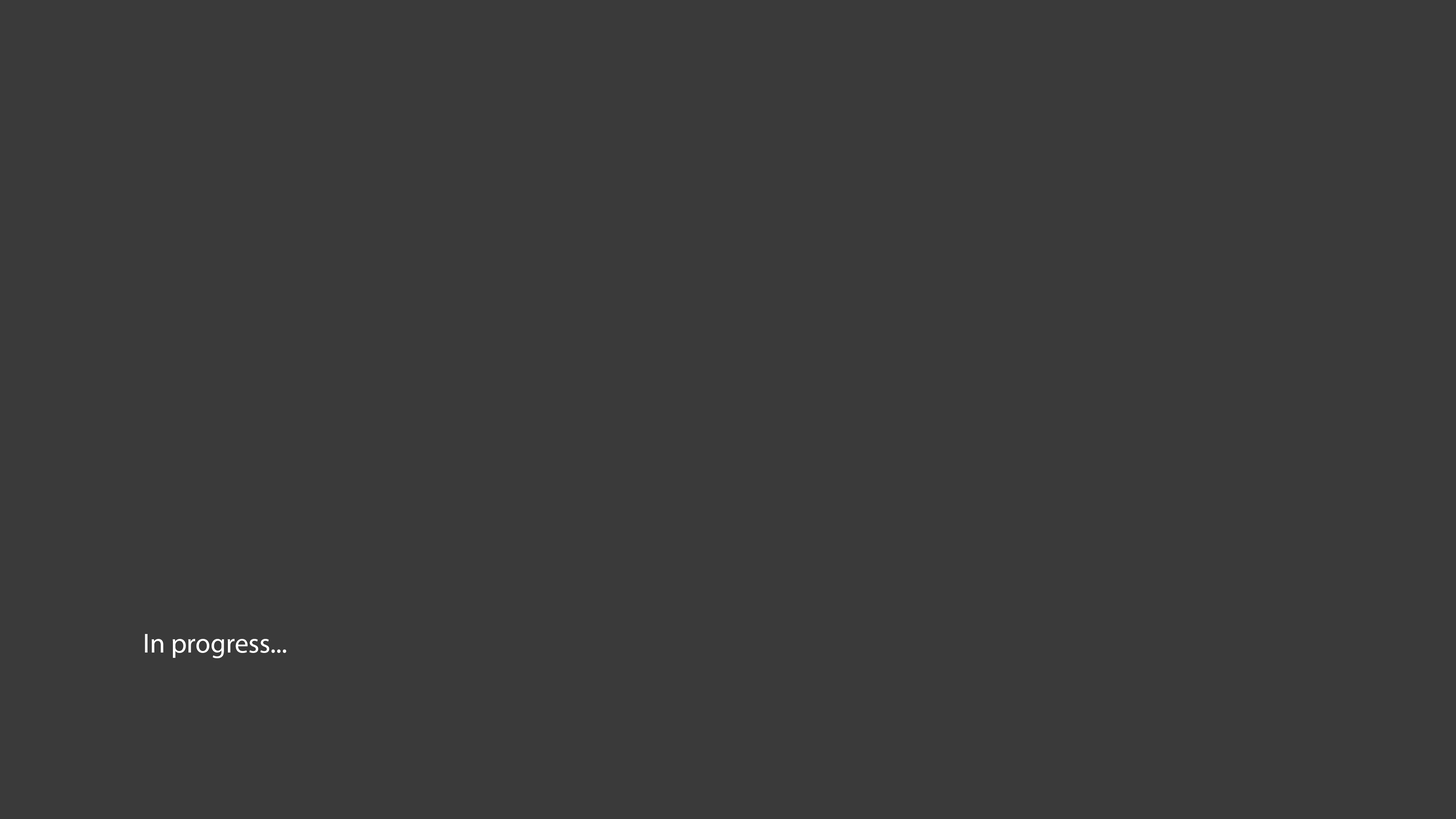
<style>
.page{position:relative;width:1456px;height:819px;background:#3a3a3a}
.page>*{position:absolute;margin:0}
.t1{font:27.6px "MyriadPro-Regular";color:#ffffff}
</style>
<div class="page">
<p class="t1" style="left:145px;top:634px;width:141px;height:24px">In progress...</p>
</div>
